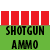
<style>
.page{position:relative;width:50px;height:50px;background:#68b83c}
.page>*{position:absolute;margin:0}
.t1{font:12px "MyriadPro-BoldCond";color:#000000}
</style>
<div class="page">
<p class="t1" style="left:6px;top:26px;width:38px;height:23px;text-align:center">SHOTGUN<br>AMMO</p>
</div>
